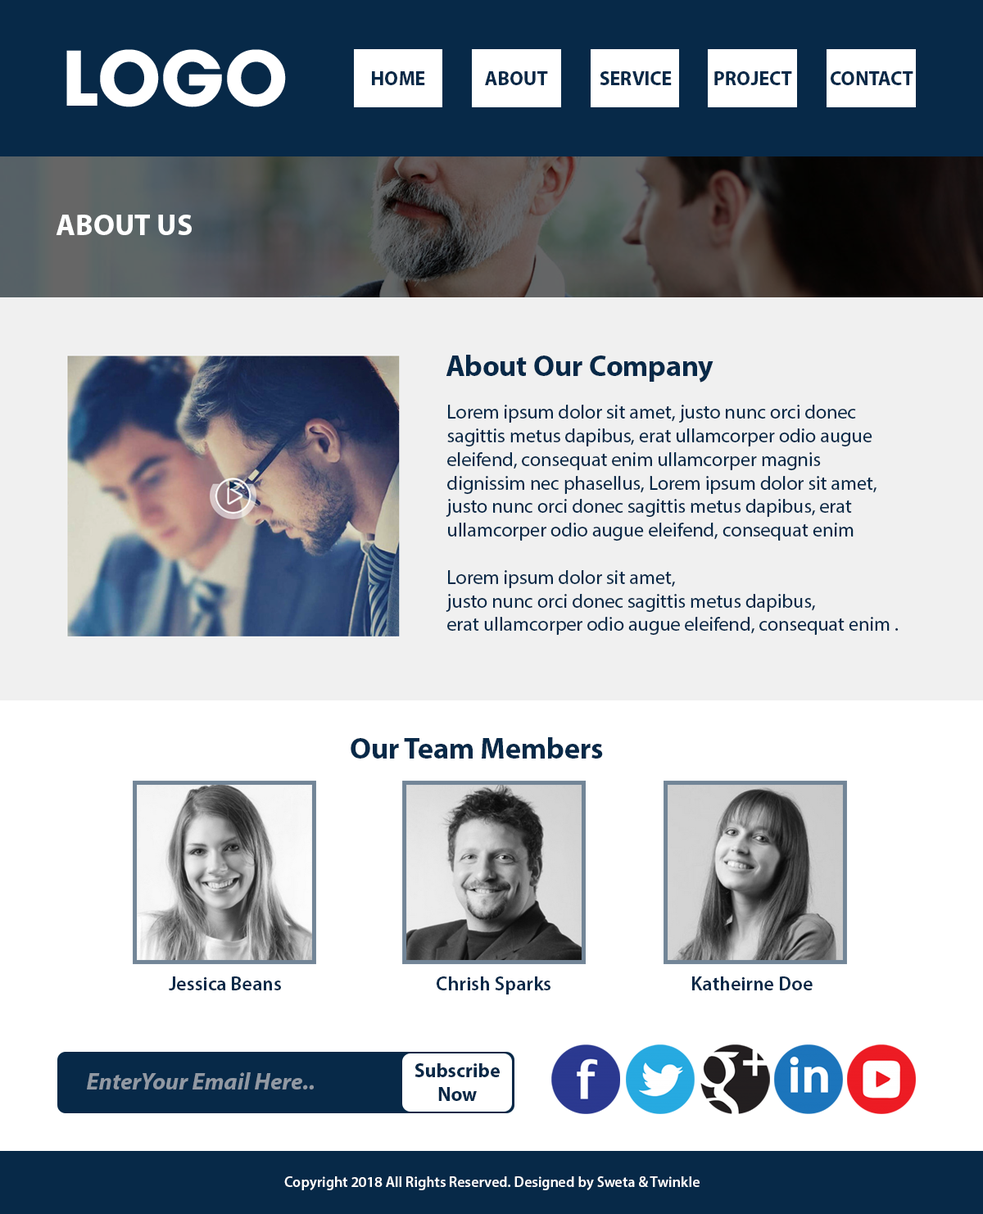
<style>
.page{position:relative;width:983px;height:1214px;background:#ffffff}
.page>*{position:absolute;margin:0}
.t1{font:19.7px "MyriadPro-Bold";color:#072948}
.t2{font:29.5px "MyriadPro-Bold";color:#feffff}
.t3{font:29.5px "MyriadPro-Bold";color:#072948}
.t4{font:19.7px "MyriadPro-Regular";color:#072948}
.t5{font:19.7px "MyriadPro-Semibold";color:#072948}
.t6{font:23.7px "MyriadPro-BoldIt";color:#9199a3}
.t7{font:14.7px "MyriadPro-Semibold";color:#ffffff}
</style>
<div class="page">
<p class="t1" style="left:372px;top:71px;width:53px;height:14px">HOME</p>
<p class="t1" style="left:485px;top:71px;width:63px;height:14px">ABOUT</p>
<p class="t1" style="left:599px;top:71px;width:72px;height:14px">SERVICE</p>
<p class="t1" style="left:714px;top:71px;width:78px;height:14px">PROJECT</p>
<p class="t1" style="left:830px;top:71px;width:83px;height:14px">CONTACT</p>
<p class="t2" style="left:56px;top:215px;width:136px;height:20px">ABOUT US</p>
<p class="t3" style="left:445px;top:355px;width:268px;height:27px">About Our Company</p>
<p class="t4" style="left:445px;top:405px;width:453px;height:230px">Lorem ipsum dolor sit amet, justo nunc orci donec <br>sagittis metus dapibus, erat ullamcorper odio augue <br>eleifend, consequat enim ullamcorper magnis <br>dignissim nec phasellus, Lorem ipsum dolor sit amet, <br>justo nunc orci donec sagittis metus dapibus, erat <br>ullamcorper odio augue eleifend, consequat enim<br><br>Lorem ipsum dolor sit amet, <br>justo nunc orci donec sagittis metus dapibus, <br>erat ullamcorper odio augue eleifend, consequat enim .</p>
<p class="t3" style="left:350px;top:737px;width:253px;height:21px">Our Team Members</p>
<p class="t5" style="left:169px;top:976px;width:112px;height:14px">Jessica Beans</p>
<p class="t5" style="left:436px;top:976px;width:114px;height:18px">Chrish Sparks</p>
<p class="t5" style="left:692px;top:976px;width:120px;height:14px">Katheirne Doe</p>
<p class="t6" style="left:87px;top:1072px;width:227px;height:17px">EnterYour Email Here..</p>
<p class="t1" style="left:414px;top:1063px;width:85px;height:38px;text-align:center">Subscribe<br>Now</p>
<p class="t7" style="left:284px;top:1176px;width:415px;height:14px">Copyright 2018 All Rights Reserved. Designed by Sweta &amp; Twinkle</p>
</div>
